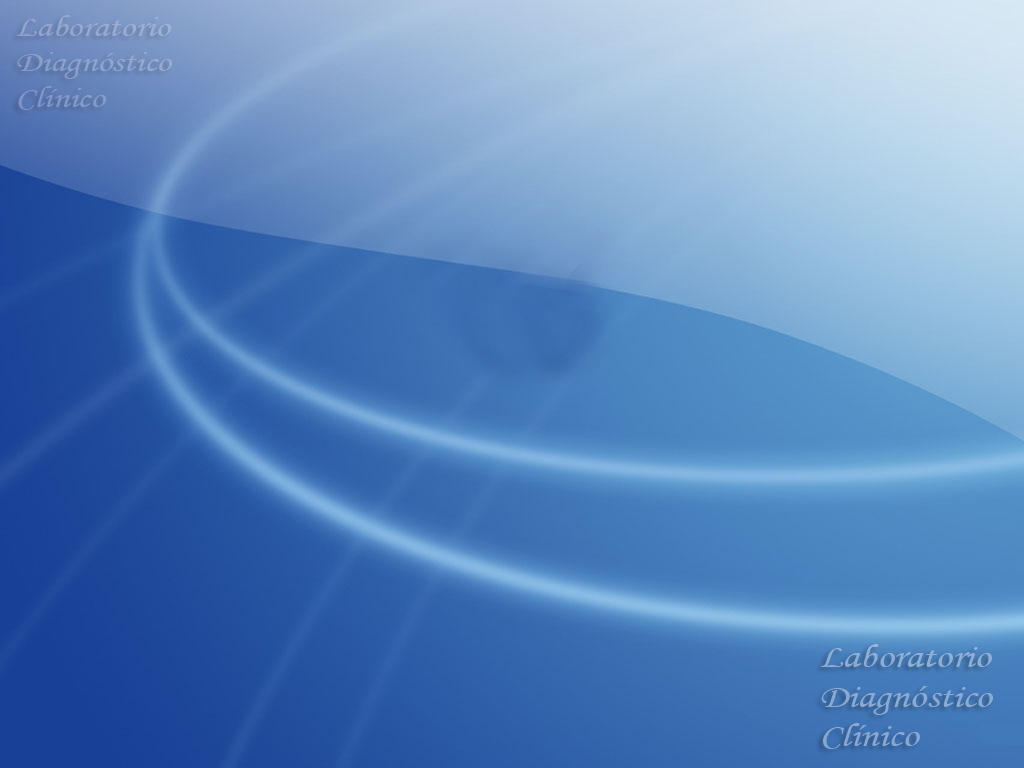
<style>
.page{position:relative;width:1024px;height:768px}
.page>*{position:absolute;margin:0}
.t1{font:29.7px "MonotypeCorsiva";color:#90a3cd;scale:1.24 1}
.t2{font:33.1px "MonotypeCorsiva";color:#8caad1;scale:1.24 1}
</style>
<div class="page">
<p class="t1" style="left:16px;top:15px;width:157px;height:95px">Laboratorio<br>Diagnóstico<br>Clínico</p>
<p class="t2" style="left:821px;top:644px;width:172px;height:105px">Laboratorio<br>Diagnóstico<br>Clínico</p>
</div>
